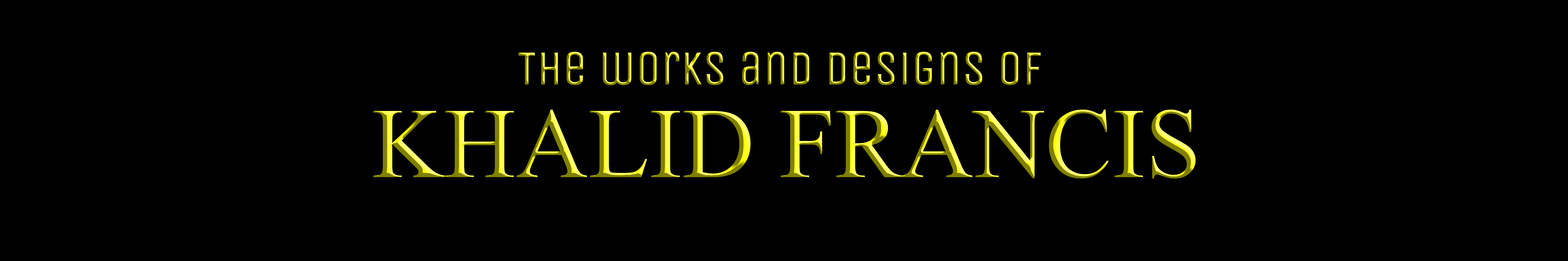
<style>
.page{position:relative;width:1568px;height:261px;background:#000000}
.page>*{position:absolute;margin:0}
.t1{font:49px/92.6px "UnicaOne-Regular"}
.t2{font:99.8px/92.6px "TimesNewRomanPSMT";text-transform:uppercase}
</style>
<div class="page">
<p class="t1" style="left:373px;top:52px;width:823px;height:127px;text-align:center">The works and designs of <br><span class="t2">Khalid Francis</span></p>
</div>
